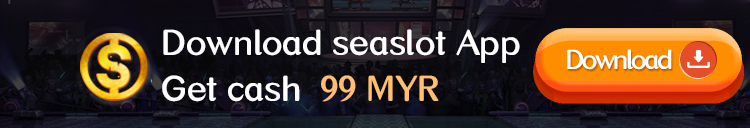
<style>
.page{position:relative;width:750px;height:128px}
.page>*{position:absolute;margin:0}
.t1{font:36.8px "TsangerXuanSanM-W05";color:#ffffff}
.t2{font:28.1px "TsangerXuanSanM-W05";letter-spacing:-0.08em;color:#ffffff}
.t3{font:36.8px "TsangerXuanSanM-W05";color:#febf70}
</style>
<div class="page">
<p class="t1" style="left:163px;top:29px;width:357px;height:34px">Download seaslot App</p>
<p class="t2" style="left:567px;top:49px;width:105px;height:21px">Download</p>
<p class="t1" style="left:162px;top:75px;width:277px;height:27px">Get cash  <span class="t3">99 MYR</span></p>
</div>
